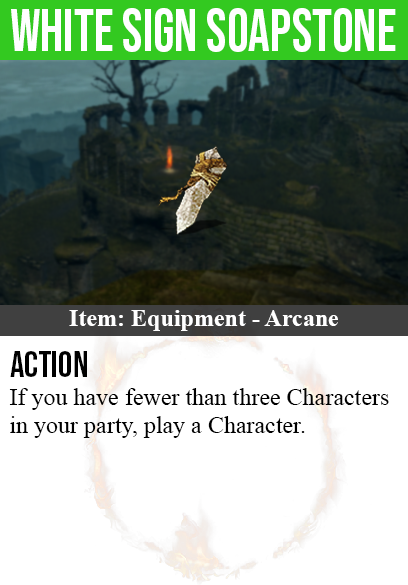
<style>
.page{position:relative;width:408px;height:585px;background:#ffffff}
.page>*{position:absolute;margin:0}
.t1{font:60px "BebasNeue-Regular";color:#ffffff;scale:0.91 1}
.t2{font:24px "TimesNewRomanPS-BoldMT";color:#ffffff}
.t3{font:36px "BebasNeue-Regular";color:#000000}
.t4{font:24px "TimesNewRomanPSMT";color:#000000}
</style>
<div class="page">
<p class="t1" style="left:11px;top:8px;width:385px;height:44px">white sign soapstone</p>
<p class="t2" style="left:69px;top:310px;width:269px;height:21px">Item: Equipment - Arcane</p>
<p class="t3" style="left:10px;top:351px;width:77px;height:26px">action</p>
<p class="t4" style="left:9px;top:388px;width:380px;height:50px">If you have fewer than three Characters<br>in your party, play a Character.</p>
</div>
